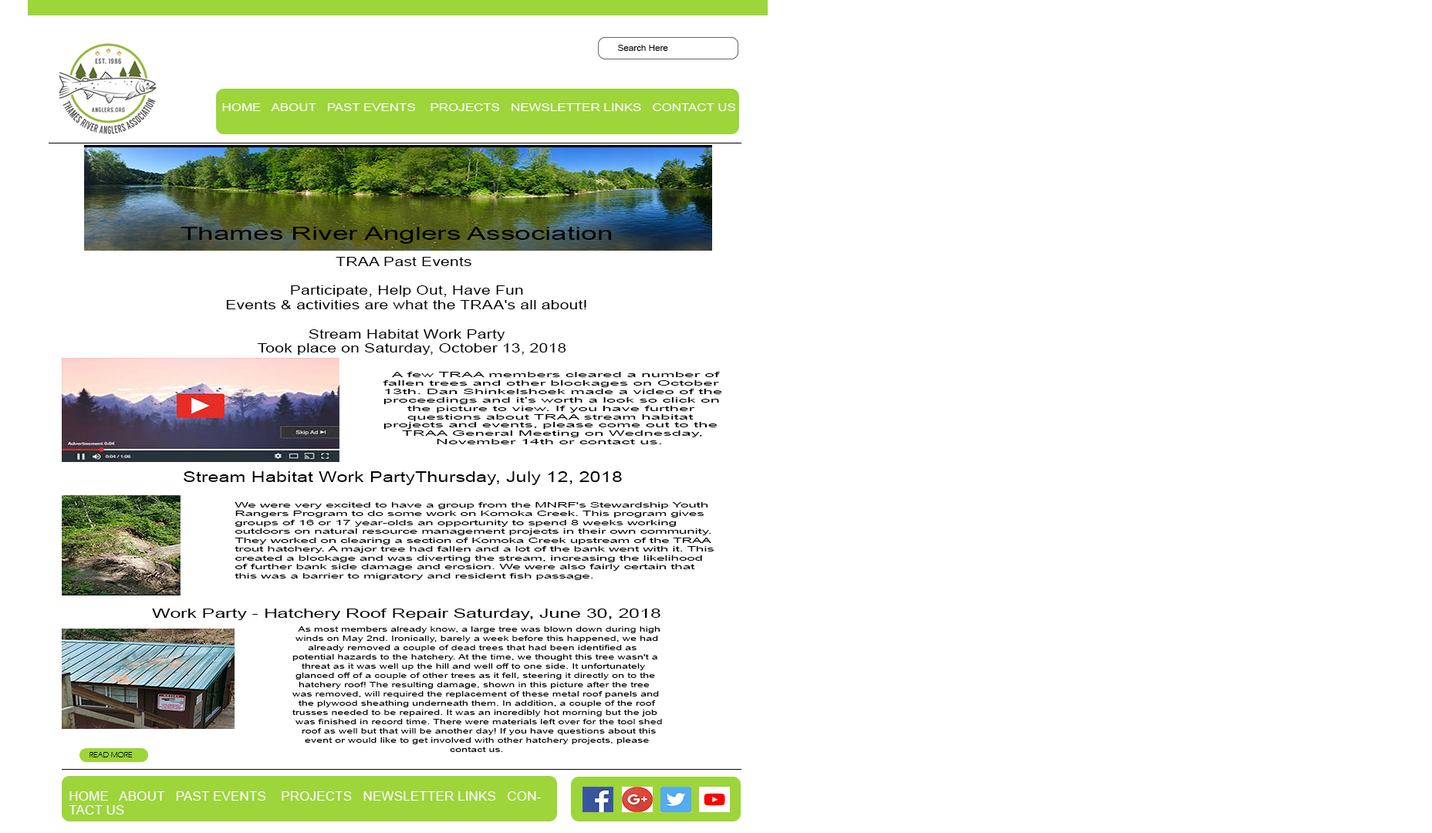
<style>
.page{position:relative;width:1432px;height:833px;background:#ffffff}
.page>*{position:absolute;margin:0}
.t1{font:8.2px "ArialMT";color:#040404;scale:1.09 1}
.t2{font:13.5px "ArialMT";color:#040404;scale:1.09 1}
.t3{font:10.1px "ArialMT";color:#fefdfd;scale:1.29 1}
.t4{font:18.5px "ArialMT";color:#030303;scale:1.54 1}
.t5{font:12.1px "ArialMT";color:#000000;scale:1.37 1}
.t6{font:7px "ArialMT";color:#000000;scale:2.48 1}
.t7{font:14.8px "ArialMT";color:#000000;scale:1.32 1}
.t8{font:7.4px "ArialMT";color:#000000;scale:1.93 1}
.t9{font:13.2px "ArialMT";color:#000000;scale:1.45 1}
.t10{font:7.7px "ArialMT";color:#000000;scale:1.44 1}
.t11{font:7.7px "ErasITC-Light";color:#000000;scale:1.06 1}
.t12{font:12px "ArialMT";color:#fefdfd;scale:1.1 1}
</style>
<div class="page">
<p class="t1" style="left:618px;top:45px;width:50px;height:6px"><span class="t2">  </span>  Search Here</p>
<p class="t3" style="left:222px;top:103px;width:513px;height:8px">HOME   ABOUT   PAST EVENTS    PROJECTS   NEWSLETTER LINKS   CONTACT US</p>
<p class="t4" style="left:180px;top:226px;width:431px;height:18px">Thames River Anglers Association</p>
<p class="t5" style="left:226px;top:257px;width:360px;height:98px">TRAA Past Events<br><br>              Participate, Help Out, Have Fun<br>Events &amp; activities are what the TRAA's all about!<br><br>                  Stream Habitat Work Party<br>       Took place on Saturday, October 13, 2018</p>
<p class="t6" style="left:383px;top:372px;width:339px;height:72px">A few TRAA members cleared a number of <br>fallen trees and other blockages on October <br>13th. Dan Shinkelshoek made a video of the <br>proceedings and it's worth a look so click on <br>     the picture to view. If you have further <br>     questions about TRAA stream habitat <br>projects and events, please come out to the <br>    TRAA General Meeting on Wednesday, <br>           November 14th or contact us.</p>
<p class="t7" style="left:184px;top:471px;width:438px;height:14px">Stream Habitat Work PartyThursday, July 12, 2018</p>
<p class="t8" style="left:234px;top:502px;width:480px;height:78px">We were very excited to have a group from the MNRF's Stewardship Youth <br>Rangers Program to do some work on Komoka Creek. This program gives <br>groups of 16 or 17 year-olds an opportunity to spend 8 weeks working <br>outdoors on natural resource management projects in their own community. <br>They worked on clearing a section of Komoka Creek upstream of the TRAA <br>trout hatchery. A major tree had fallen and a lot of the bank went with it. This <br>created a blockage and was diverting the stream, increasing the likelihood <br>of further bank side damage and erosion. We were also fairly certain that <br>this was a barrier to migratory and resident fish passage.</p>
<p class="t9" style="left:152px;top:609px;width:508px;height:11px">Work Party - Hatchery Roof Repair Saturday, June 30, 2018</p>
<p class="t10" style="left:292px;top:626px;width:370px;height:126px">As most members already know, a large tree was blown down during high<br> winds on May 2nd. Ironically, barely a week before this happened, we had <br>     already removed a couple of dead trees that had been identified as <br>potential hazards to the hatchery. At the time, we thought this tree wasn't a <br>   threat as it was well up the hill and well off to one side. It unfortunately <br> glanced off of a couple of other trees as it fell, steering it directly on to the <br>  hatchery roof! The resulting damage, shown in this picture after the tree <br>was removed, will required the replacement of these metal roof panels and <br>  the plywood sheathing underneath them. In addition, a couple of the roof <br>trusses needed to be repaired. It was an incredibly hot morning but the job <br> was finished in record time. There were materials left over for the tool shed <br>   roof as well but that will be another day! If you have questions about this<br>    event or would like to get involved with other hatchery projects, please <br>                                                   contact us.</p>
<p class="t11" style="left:89px;top:752px;width:44px;height:5px">READ MORE</p>
<p class="t12" style="left:69px;top:791px;width:472px;height:23px">HOME   ABOUT   PAST EVENTS    PROJECTS   NEWSLETTER LINKS   CONTACT US</p>
</div>
